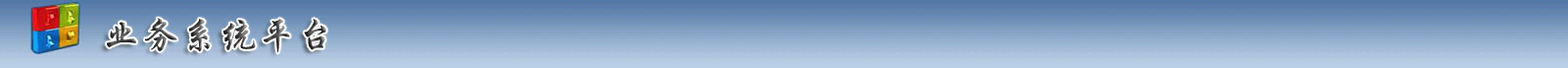
<style>
.page{position:relative;width:1568px;height:68px}
.page>*{position:absolute;margin:0}
.t1{font:38.9px "SingkaiCSEG-Bold-GB"}
</style>
<div class="page">
<p class="t1" style="left:107px;top:18px;width:219px;height:35px">业务系统平台</p>
</div>
